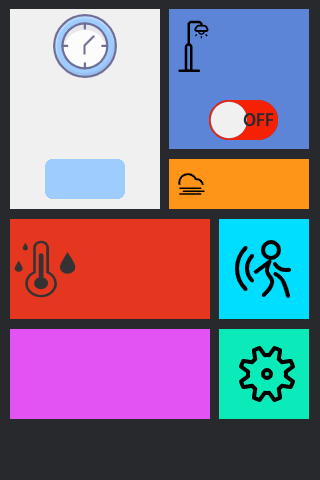
<style>
.page{position:relative;width:320px;height:480px;background:#27292d}
.page>*{position:absolute;margin:0}
.t1{font:16.7px "AdobeHeitiStd-Regular";color:#27292d;font-weight:bold}
</style>
<div class="page">
<p class="t1" style="left:243px;top:113px;width:31px;height:14px">OFF</p>
</div>
